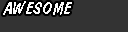
<style>
.page{position:relative;width:128px;height:32px;background:#333333}
.page>*{position:absolute;margin:0}
.t1{font:18px "DomDiagonalBT-Regular";letter-spacing:0.05em;color:#fbfbfb}
</style>
<div class="page">
<p class="t1" style="left:3px;top:1px;width:69px;height:14px">AWESOME</p>
</div>
